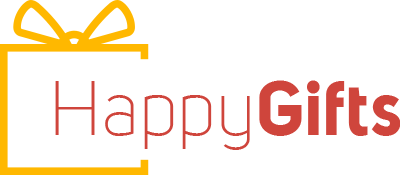
<style>
.page{position:relative;width:400px;height:175px;background:#ffffff}
.page>*{position:absolute;margin:0}
.t1{font:76.1px "UniSansLight";color:#cf453c}
.t2{font:76.1px "UniSansBold";color:#cf453c}
</style>
<div class="page">
<p class="t1" style="left:55px;top:80px;width:346px;height:70px">Happy<span class="t2">Gifts</span></p>
</div>
